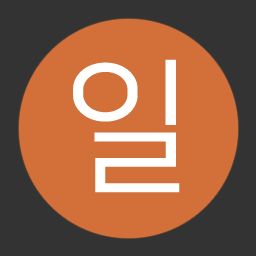
<style>
.page{position:relative;width:256px;height:256px;background:#d36f38}
.page>*{position:absolute;margin:0}
.t1{font:144px "NanumSquareOTFR";color:#ffffff}
</style>
<div class="page">
<p class="t1" style="left:73px;top:59px;width:107px;height:134px">일</p>
</div>
